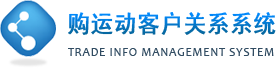
<style>
.page{position:relative;width:279px;height:68px;background:#ffffff}
.page>*{position:absolute;margin:0}
.t1{font:24.6px "SimHei";font-weight:bold;scale:0.92 1}
</style>
<div class="page">
<p class="t1" style="left:68px;top:12px;width:208px;height:23px">购运动客户关系系统</p>
</div>
